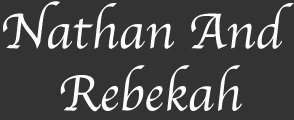
<style>
.page{position:relative;width:294px;height:120px;background:#333333}
.page>*{position:absolute;margin:0}
.t1{font:51.9px "Apple-Chancery";color:#ffffff}
</style>
<div class="page">
<p class="t1" style="left:3px;top:1px;width:291px;height:111px">Nathan And <br>    Rebekah</p>
</div>
